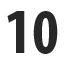
<style>
.page{position:relative;width:64px;height:64px;background:#ffffff}
.page>*{position:absolute;margin:0}
.t1{font:63.5px "MyriadPro-BoldCond";color:#282828}
</style>
<div class="page">
<p class="t1" style="left:7px;top:11px;width:51px;height:43px">10</p>
</div>
